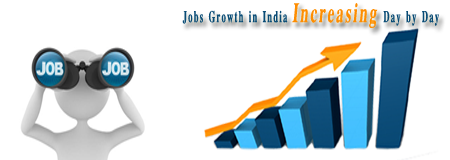
<style>
.page{position:relative;width:450px;height:160px;background:#ffffff}
.page>*{position:absolute;margin:0}
.t1{font:25px "EucrosiaUPCBold";letter-spacing:0.1em;color:#0a4c76;scale:0.52 1}
.t2{font:42.2px "EucrosiaUPCBoldItalic";letter-spacing:0.1em;color:#fe8d00;scale:0.52 1}
</style>
<div class="page">
<p class="t1" style="left:182px;top:3px;width:257px;height:25px">Jobs Growth in India <span class="t2">Increasing</span> Day by Day</p>
</div>
